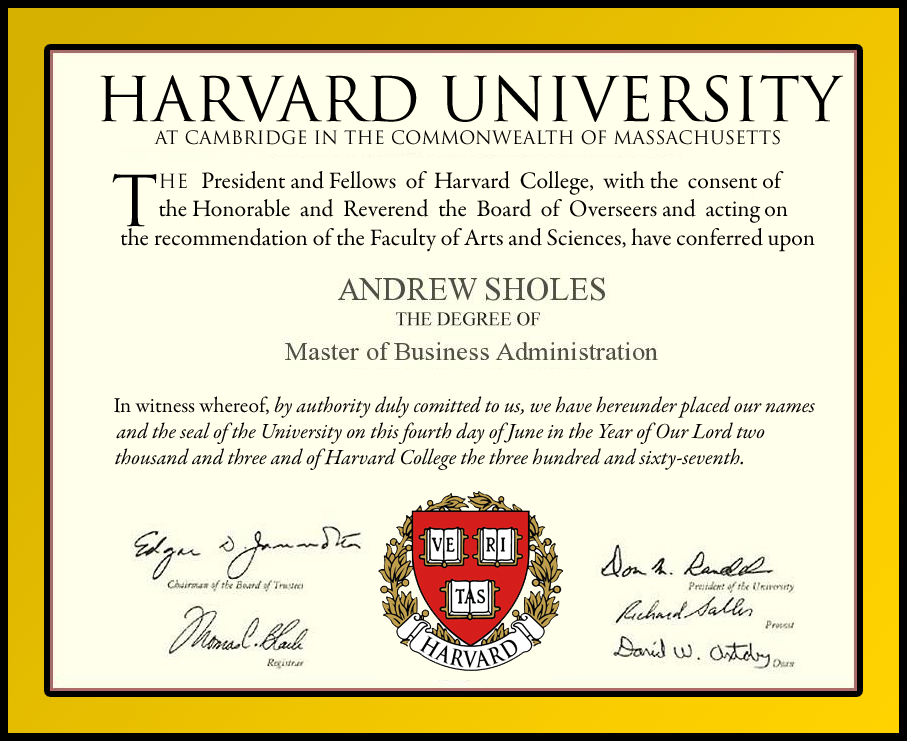
<style>
.page{position:relative;width:907px;height:741px;background:#ffffeb}
.page>*{position:absolute;margin:0}
.t1{font:60px "TrajanPro-Regular";color:#000000}
.t2{font:18px "TrajanPro-Regular";color:#000000}
.t3{font:68.5px "TrajanPro-Regular";color:#000000}
.t4{font:23.9px "GaramondPremrPro";color:#000000}
.t5{font:19.1px "TrajanPro-Regular";color:#000000}
.t6{font:21.6px "GaramondPremrPro-It";color:#000000}
.t7{font:21.6px "GaramondPremrPro";color:#000000}
</style>
<div class="page">
<p class="t1" style="left:100px;top:75px;width:744px;height:47px">HARVARD UNIVERSITY</p>
<p class="t2" style="left:154px;top:130px;width:626px;height:15px">AT CAMBRIDGE IN THE COMMONWEALTH OF MASSACHUSETTS</p>
<p class="t3" style="left:112px;top:173px;width:45px;height:54px">T</p>
<p class="t4" style="left:121px;top:171px;width:694px;height:81px"><span class="t5"> HE  </span>President and Fellows  of  Harvard  College,  with the  consent of<br> the Honorable  and  Reverend  the  Board  of  Overseers and  acting on<br> the recommendation of the Faculty of Arts and Sciences, have conferred upon</p>
<p class="t6" style="left:114px;top:396px;width:701px;height:74px;text-align:center"><span class="t7">In witness whereof, </span>by authority duly comitted to us, we have hereunder placed our names<br>and the seal of the University on this fourth day of June in the Year of Our Lord two           <br>thousand and three and of Harvard College the three hundred and sixty-seventh.</p>
</div>
